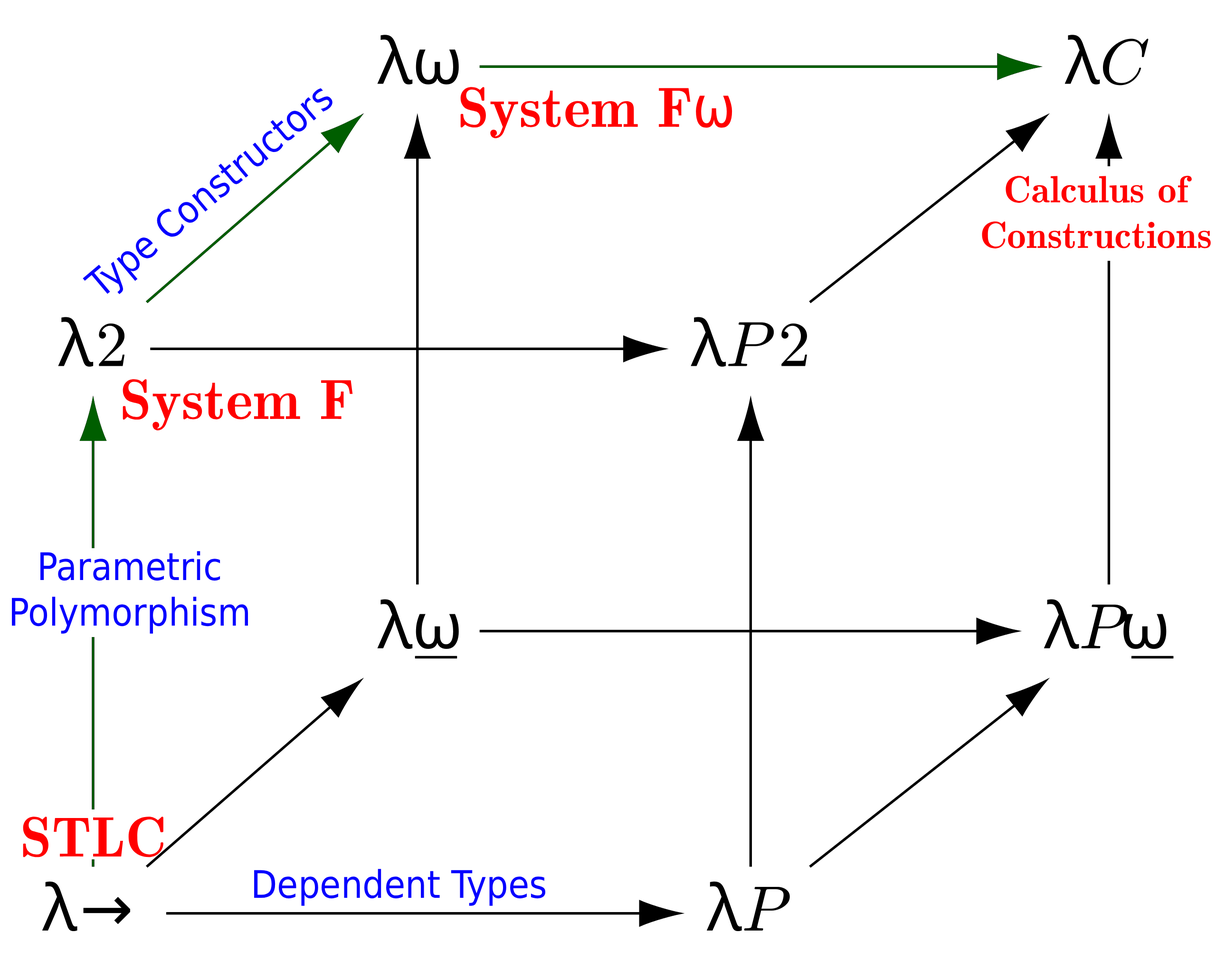
<style>
.page{position:relative;width:1216px;height:980px;background:#ffffff}
.page>*{position:absolute;margin:0}
.t1{font:38px "DejaVuSansCondensed";color:#0600ff}
.t2{font:57px "LMRomanDemi10-Regular";color:#ff0000}
.t3{font:57px "DejaVuSansCondensed";color:#ff0000}
.t4{font:38px "LMRomanDemi10-Regular";color:#ff0000}
</style>
<div class="page">
<p class="t1" style="left:83px;top:88px;width:250px;height:207px;rotate:-40deg">Type Constructors</p>
<p class="t2" style="left:460px;top:87px;width:273px;height:51px">System F<span class="t3">ω</span></p>
<p class="t4" style="left:982px;top:176px;width:229px;height:73px;text-align:center">Calculus of<br>Constructions</p>
<p class="t2" style="left:123px;top:379px;width:230px;height:52px">System F</p>
<p class="t1" style="left:12px;top:551px;width:237px;height:83px;text-align:center">Parametric<br>Polymorphism</p>
<p class="t2" style="left:23px;top:817px;width:140px;height:41px">STLC</p>
<p class="t1" style="left:254px;top:869px;width:291px;height:37px">Dependent Types</p>
</div>
